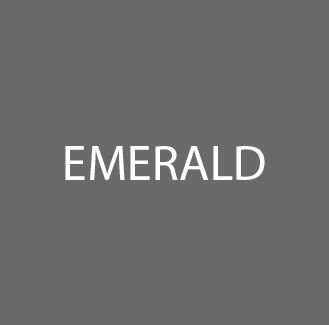
<style>
.page{position:relative;width:329px;height:325px;background:#6a6a6a}
.page>*{position:absolute;margin:0}
.t1{font:50px "MyriadPro-Regular";color:#ffffff}
</style>
<div class="page">
<p class="t1" style="left:65px;top:146px;width:200px;height:34px">EMERALD</p>
</div>
